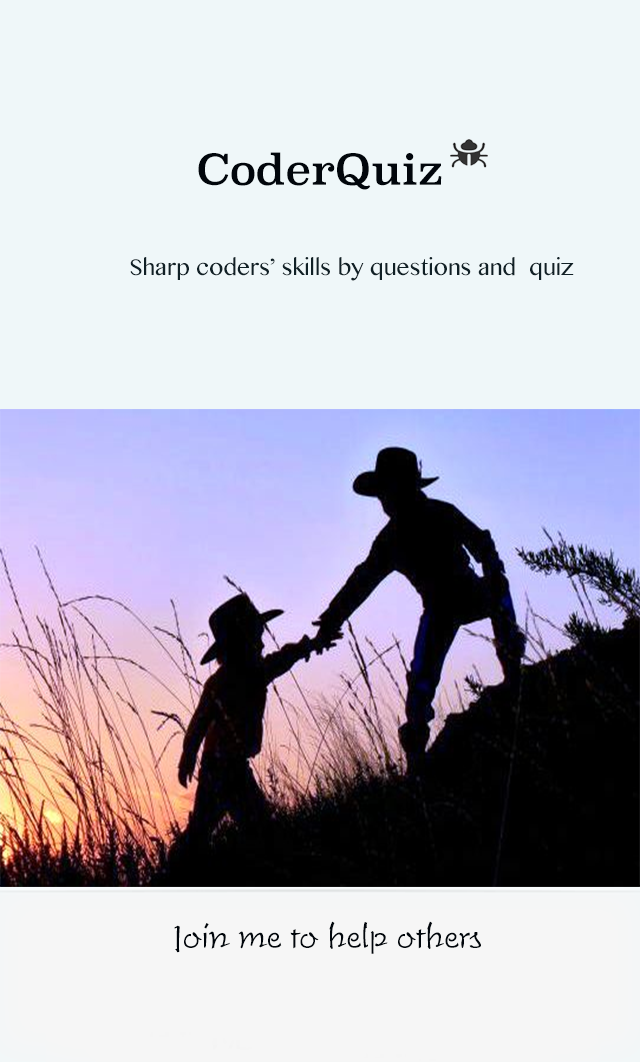
<style>
.page{position:relative;width:640px;height:1062px;background:#eff7f9}
.page>*{position:absolute;margin:0}
.t1{font:41.7px "Superclarendon-Regular";color:#01060c}
.t2{font:22.7px "TamilMN";color:#102026}
.t3{font:31px "TimeScrD-Ligh";color:#01060c}
</style>
<div class="page">
<p class="t1" style="left:198px;top:152px;width:244px;height:38px">CoderQuiz</p>
<p class="t2" style="left:130px;top:257px;width:444px;height:24px">Sharp coders’ skills by questions and  quiz</p>
<p class="t3" style="left:174px;top:921px;width:307px;height:33px">Join me to help others</p>
</div>
